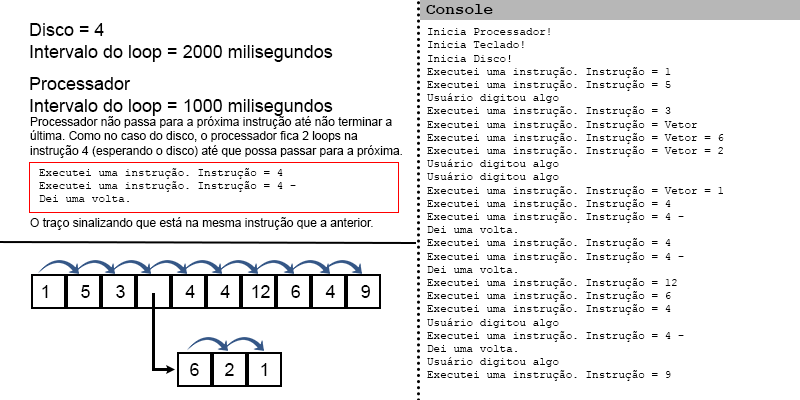
<style>
.page{position:relative;width:800px;height:400px;background:#ffffff}
.page>*{position:absolute;margin:0}
.t1{font:16px "CourierNewPS-BoldMT";color:#000000}
.t2{font:18px "ArialMT";color:#000000}
.t3{font:11px "CourierNewPSMT";color:#000000}
.t4{font:12px "ArialMT";color:#000000}
</style>
<div class="page">
<p class="t1" style="left:426px;top:4px;width:67px;height:10px">Console</p>
<p class="t2" style="left:30px;top:23px;width:303px;height:93px">Disco = 4<br>Intervalo do loop = 2000 milisegundos<br><br>Processador<br>Intervalo do loop = 1000 milisegundos</p>
<p class="t3" style="left:427px;top:28px;width:297px;height:353px">Inicia Processador!<br>Inicia Teclado!<br>Inicia Disco!<br>Executei uma instrução. Instrução = 1<br>Executei uma instrução. Instrução = 5<br>Usuário digitou algo<br>Executei uma instrução. Instrução = 3<br>Executei uma instrução. Instrução = Vetor<br>Executei uma instrução. Instrução = Vetor = 6<br>Executei uma instrução. Instrução = Vetor = 2<br>Usuário digitou algo<br>Usuário digitou algo<br>Executei uma instrução. Instrução = Vetor = 1<br>Executei uma instrução. Instrução = 4 <br>Executei uma instrução. Instrução = 4 -<br>Dei uma volta.<br>Executei uma instrução. Instrução = 4<br>Executei uma instrução. Instrução = 4 -<br>Dei uma volta.<br>Executei uma instrução. Instrução = 12<br>Executei uma instrução. Instrução = 6<br>Executei uma instrução. Instrução = 4<br>Usuário digitou algo<br>Executei uma instrução. Instrução = 4 - <br>Dei uma volta.<br>Usuário digitou algo<br>Executei uma instrução. Instrução = 9</p>
<p class="t4" style="left:30px;top:116px;width:372px;height:114px">Processador não passa para a próxima instrução até não terminar a <br>última. Como no caso do disco, o processador fica 2 loops na <br>instrução 4 (esperando o disco) até que possa passar para a próxima.<br><br><br><br><br>O traço sinalizando que está na mesma instrução que a anterior.</p>
<p class="t3" style="left:39px;top:168px;width:257px;height:34px">Executei uma instrução. Instrução = 4 <br>Executei uma instrução. Instrução = 4 -<br>Dei uma volta.</p>
<p class="t2" style="left:42px;top:285px;width:328px;height:13px">1      5     3            4     4    12    6     4     9</p>
<p class="t2" style="left:190px;top:363px;width:77px;height:13px">6     2     1</p>
</div>
